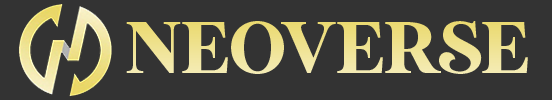
<style>
.page{position:relative;width:552px;height:100px;background:#333333}
.page>*{position:absolute;margin:0}
.t1{font:72.5px "MADESunflower"}
</style>
<div class="page">
<p class="t1" style="left:126px;top:21px;width:402px;height:53px">NEOVERSE</p>
</div>
